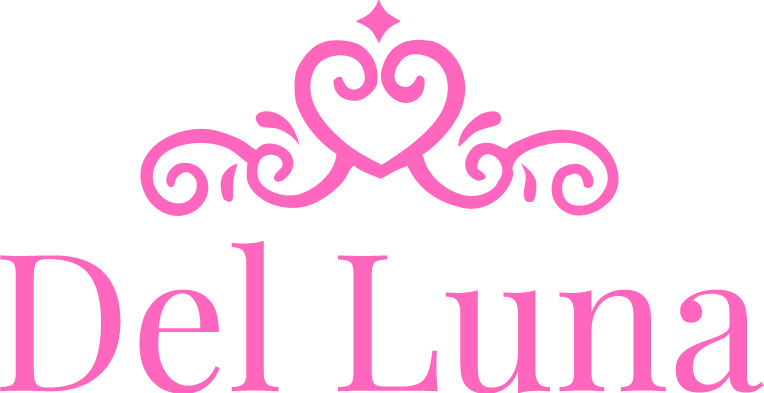
<style>
.page{position:relative;width:764px;height:393px;background:#ffffff}
.page>*{position:absolute;margin:0}
.t1{font:191.5px "PlayfairDisplay-Regular";color:#ff67be}
</style>
<div class="page">
<p class="t1" style="left:0px;top:240px;width:764px;height:154px">Del Luna</p>
</div>
